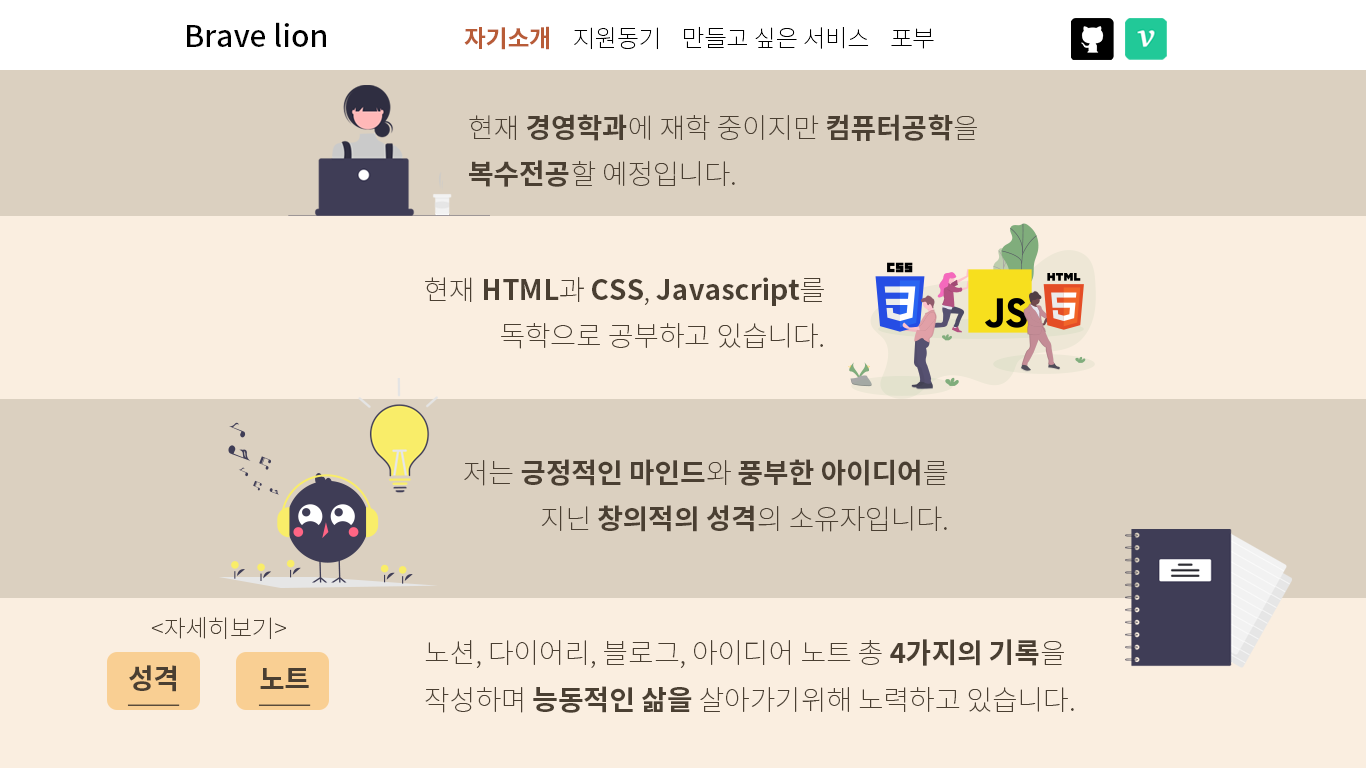
<style>
.page{position:relative;width:1366px;height:768px;background:#dbd0c0}
.page>*{position:absolute;margin:0}
.t1{font:30px "NotoSansKR-Medium";color:#000000}
.t2{font:24px "NotoSansKR-Thin";color:#000000}
.t3{font:24px "NotoSansKR-Bold";color:#b85c38}
.t4{font:27.8px/46.3px "NotoSansKR-Thin";color:#4a3f32}
.t5{font:27.8px/46.3px "NotoSansKR-Bold";color:#4a3f32}
.t6{font:24px "NotoSansKR-Thin";color:#4a3f32}
.t7{font:27.8px "NotoSansKR-Bold";color:#4a3f32;text-decoration:underline}
</style>
<div class="page">
<p class="t1" style="left:187px;top:22px;width:139px;height:25px">Brave lion</p>
<p class="t2" style="left:464px;top:26px;width:470px;height:24px"><span class="t3">자기소개 </span>   지원동기    만들고 싶은 서비스    포부</p>
<p class="t4" style="left:469px;top:114px;width:508px;height:73px">현재 <span class="t5">경영학과</span>에 재학 중이지만 <span class="t5">컴퓨터공학</span>을 <span class="t5">복수전공</span>할 예정입니다.</p>
<p class="t4" style="left:425px;top:277px;width:399px;height:72px;text-align:right">현재 <span class="t5">HTML</span>과 <span class="t5">CSS</span>, <span class="t5">Javascript</span>를<br>독학으로 공부하고 있습니다.</p>
<p class="t4" style="left:464px;top:459px;width:484px;height:73px;text-align:right">저는 <span class="t5">긍정적인 마인드</span>와 <span class="t5">풍부한 아이디어</span>를<br>지닌 <span class="t5">창의적의 성격</span>의 소유자입니다.</p>
<p class="t6" style="left:151px;top:616px;width:135px;height:24px">&lt;자세히보기&gt;</p>
<p class="t4" style="left:425px;top:639px;width:649px;height:74px">노션, 다이어리, 블로그, 아이디어 노트 총 <span class="t5">4가지의 기록</span>을<br>작성하며 <span class="t5">능동적인 삶을</span> 살아가기위해 노력하고 있습니다.</p>
<p class="t7" style="left:127px;top:665px;width:53px;height:41px">성격</p>
<p class="t7" style="left:258px;top:668px;width:53px;height:38px">노트</p>
</div>
